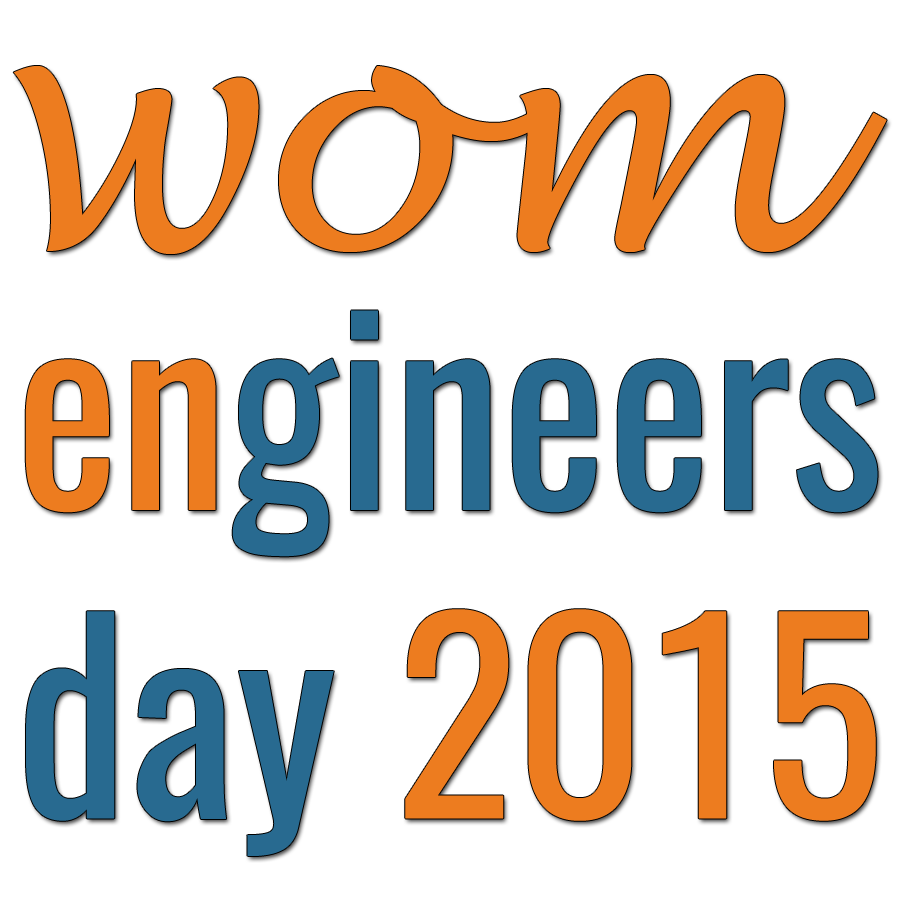
<style>
.page{position:relative;width:900px;height:900px;background:#ffffff}
.page>*{position:absolute;margin:0}
.t1{font:320.5px "LucidaHandwriting-Italic";color:#ed7c1f}
.t2{font:257.2px "Oswald-Regular";color:#286a90;scale:0.97 1}
.t3{font:257.2px "Oswald-Regular";color:#ed7c1f;scale:0.97 1}
.t4{font:255.5px "Oswald-Regular";color:#ed7c1f}
.t5{font:255.5px "Oswald-Regular";color:#286a90}
</style>
<div class="page">
<p class="t1" style="left:13px;top:66px;width:874px;height:188px">wom</p>
<p class="t2" style="left:25px;top:310px;width:853px;height:247px"><span class="t3">en</span>gineers</p>
<p class="t4" style="left:26px;top:609px;width:850px;height:247px"><span class="t5">day </span>2015</p>
</div>
